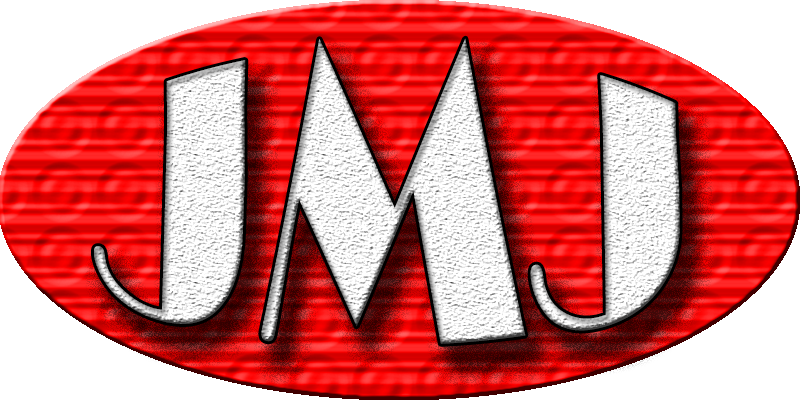
<style>
.page{position:relative;width:800px;height:400px;background:#ffffff}
.page>*{position:absolute;margin:0}
.t1{font:270px "Broadway"}
</style>
<div class="page">
<p class="t1" style="left:94px;top:38px;width:586px;height:306px">JMJ</p>
</div>
